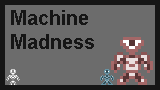
<style>
.page{position:relative;width:160px;height:90px;background:#6c6c6c}
.page>*{position:absolute;margin:0}
.t1{font:20px "Arial-BoldMT";color:#161616}
</style>
<div class="page">
<p class="t1" style="left:11px;top:10px;width:83px;height:39px">Machine<br>Madness</p>
</div>
